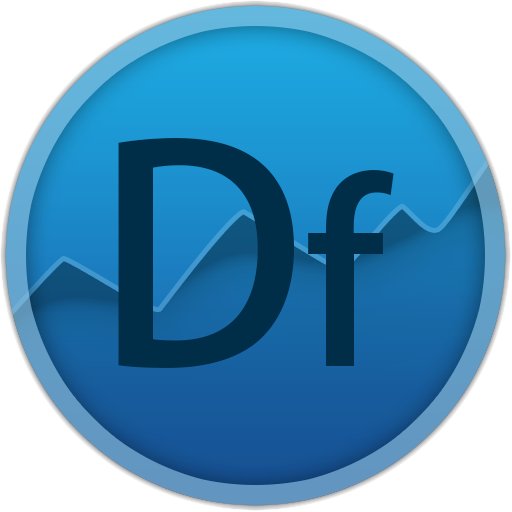
<style>
.page{position:relative;width:512px;height:512px;background:#ffffff}
.page>*{position:absolute;margin:0}
.t1{font:296.9px "AdobeHeitiStd-Regular";color:#002d47}
.t2{font:241.2px "AdobeHeitiStd-Regular";color:#002d47}
</style>
<div class="page">
<p class="t1" style="left:118px;top:138px;width:276px;height:230px">D<span class="t2">f</span></p>
</div>
